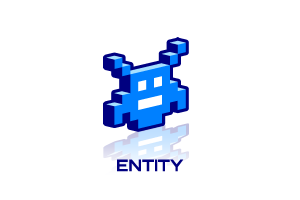
<style>
.page{position:relative;width:300px;height:200px;background:#ffffff}
.page>*{position:absolute;margin:0}
.t1{font:16px "Orbitron-Bold";letter-spacing:0.005em;color:#000080}
</style>
<div class="page">
<p class="t1" style="left:117px;top:159px;width:67px;height:13px">ENTITY</p>
</div>
